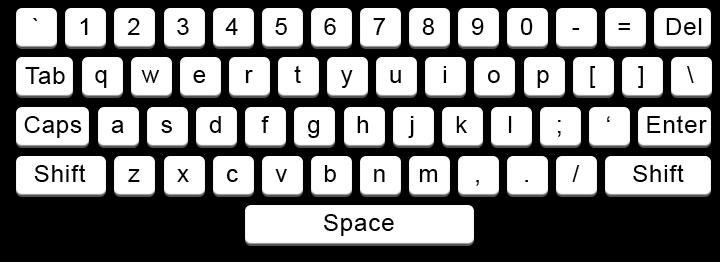
<style>
.page{position:relative;width:720px;height:262px;background:#000000}
.page>*{position:absolute;margin:0}
.t1{font:40.9px "ArialMT";letter-spacing:0.04em;color:#000000}
</style>
<div class="page">
<p class="t1" style="left:33px;top:18px;width:4px;height:3px">`</p>
<p class="t1" style="left:80px;top:18px;width:8px;height:17px">1</p>
<p class="t1" style="left:127px;top:18px;width:13px;height:17px">2</p>
<p class="t1" style="left:177px;top:18px;width:12px;height:17px">3</p>
<p class="t1" style="left:225px;top:18px;width:13px;height:17px">4</p>
<p class="t1" style="left:275px;top:18px;width:12px;height:17px">5</p>
<p class="t1" style="left:324px;top:18px;width:12px;height:17px">6</p>
<p class="t1" style="left:373px;top:18px;width:13px;height:17px">7</p>
<p class="t1" style="left:422px;top:18px;width:12px;height:17px">8</p>
<p class="t1" style="left:471px;top:18px;width:13px;height:17px">9</p>
<p class="t1" style="left:520px;top:18px;width:13px;height:17px">0</p>
<p class="t1" style="left:572px;top:28px;width:8px;height:2px">-</p>
<p class="t1" style="left:618px;top:23px;width:12px;height:7px">=</p>
<p class="t1" style="left:666px;top:18px;width:36px;height:17px">Del</p>
<p class="t1" style="left:294px;top:65px;width:7px;height:18px">t</p>
<p class="t1" style="left:25px;top:67px;width:40px;height:17px">Tab</p>
<p class="t1" style="left:95px;top:70px;width:12px;height:18px">q</p>
<p class="t1" style="left:141px;top:70px;width:19px;height:13px">w</p>
<p class="t1" style="left:193px;top:70px;width:13px;height:13px">e</p>
<p class="t1" style="left:245px;top:70px;width:8px;height:13px">r</p>
<p class="t1" style="left:341px;top:70px;width:12px;height:18px">y</p>
<p class="t1" style="left:390px;top:70px;width:11px;height:13px">u</p>
<p class="t1" style="left:443px;top:66px;width:4px;height:17px">i</p>
<p class="t1" style="left:487px;top:70px;width:13px;height:13px">o</p>
<p class="t1" style="left:537px;top:70px;width:12px;height:18px">p</p>
<p class="t1" style="left:590px;top:66px;width:6px;height:22px">[</p>
<p class="t1" style="left:638px;top:66px;width:5px;height:22px">]</p>
<p class="t1" style="left:687px;top:66px;width:7px;height:17px">\</p>
<p class="t1" style="left:24px;top:116px;width:58px;height:22px">Caps</p>
<p class="t1" style="left:111px;top:120px;width:13px;height:13px">a</p>
<p class="t1" style="left:161px;top:120px;width:11px;height:13px">s</p>
<p class="t1" style="left:209px;top:116px;width:12px;height:17px">d</p>
<p class="t1" style="left:261px;top:116px;width:8px;height:17px">f</p>
<p class="t1" style="left:307px;top:120px;width:13px;height:18px">g</p>
<p class="t1" style="left:357px;top:116px;width:12px;height:17px">h</p>
<p class="t1" style="left:408px;top:116px;width:6px;height:22px">j</p>
<p class="t1" style="left:456px;top:116px;width:11px;height:17px">k</p>
<p class="t1" style="left:508px;top:116px;width:4px;height:17px">l</p>
<p class="t1" style="left:558px;top:120px;width:3px;height:17px">;</p>
<p class="t1" style="left:607px;top:116px;width:3px;height:6px">‘</p>
<p class="t1" style="left:647px;top:115px;width:60px;height:18px">Enter</p>
<p class="t1" style="left:34px;top:164px;width:52px;height:18px">Shift</p>
<p class="t1" style="left:128px;top:169px;width:12px;height:13px">z</p>
<p class="t1" style="left:177px;top:169px;width:12px;height:13px">x</p>
<p class="t1" style="left:226px;top:169px;width:12px;height:13px">c</p>
<p class="t1" style="left:275px;top:169px;width:12px;height:13px">v</p>
<p class="t1" style="left:324px;top:165px;width:12px;height:17px">b</p>
<p class="t1" style="left:374px;top:169px;width:11px;height:13px">n</p>
<p class="t1" style="left:419px;top:169px;width:19px;height:13px">m</p>
<p class="t1" style="left:572px;top:165px;width:8px;height:17px">/</p>
<p class="t1" style="left:633px;top:164px;width:51px;height:18px">Shift</p>
<p class="t1" style="left:476px;top:180px;width:3px;height:6px">,</p>
<p class="t1" style="left:525px;top:180px;width:3px;height:2px">.</p>
<p class="t1" style="left:324px;top:214px;width:70px;height:22px">Space</p>
</div>
